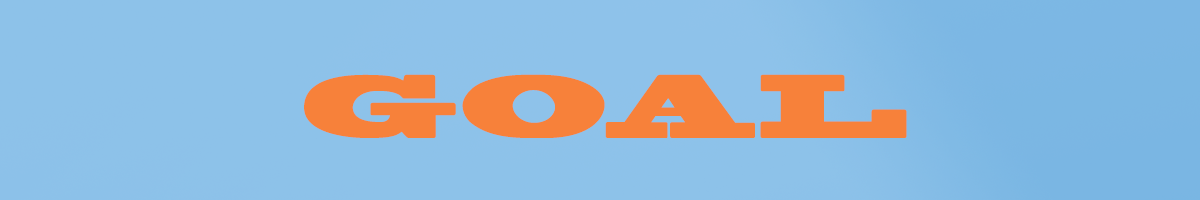
<style>
.page{position:relative;width:1200px;height:200px;background:#8dc2e9}
.page>*{position:absolute;margin:0}
.t1{font:83.3px "BlackoakStd";color:#f7813a;font-weight:bold}
</style>
<div class="page">
<p class="t1" style="left:304px;top:74px;width:603px;height:64px">GOAL</p>
</div>
